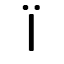
<style>
.page{position:relative;width:64px;height:64px;background:#ffffff}
.page>*{position:absolute;margin:0}
.t1{font:58.3px "Calibri";color:#000000}
</style>
<div class="page">
<p class="t1" style="left:22px;top:5px;width:18px;height:46px">Ї</p>
</div>
